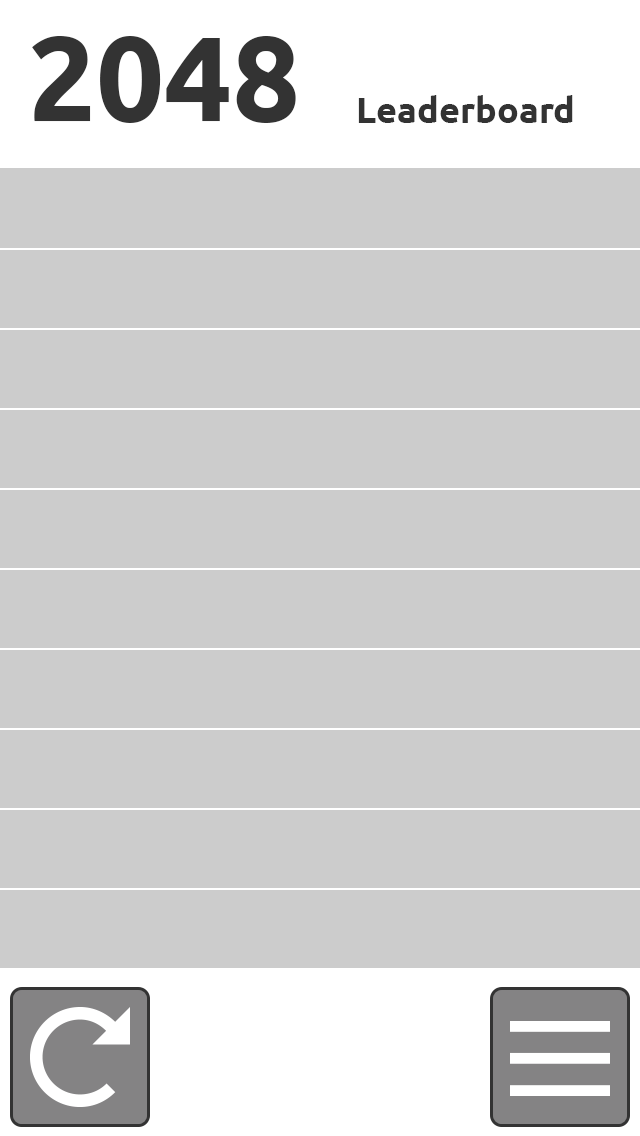
<style>
.page{position:relative;width:640px;height:1136px;background:#cccccc}
.page>*{position:absolute;margin:0}
.t1{font:120px "Ubuntu-Bold";color:#333333}
.t2{font:36px "Ubuntu-Bold";color:#333333}
</style>
<div class="page">
<p class="t1" style="left:32px;top:36px;width:264px;height:87px">2048</p>
<p class="t2" style="left:358px;top:95px;width:215px;height:28px">Leaderboard</p>
</div>
